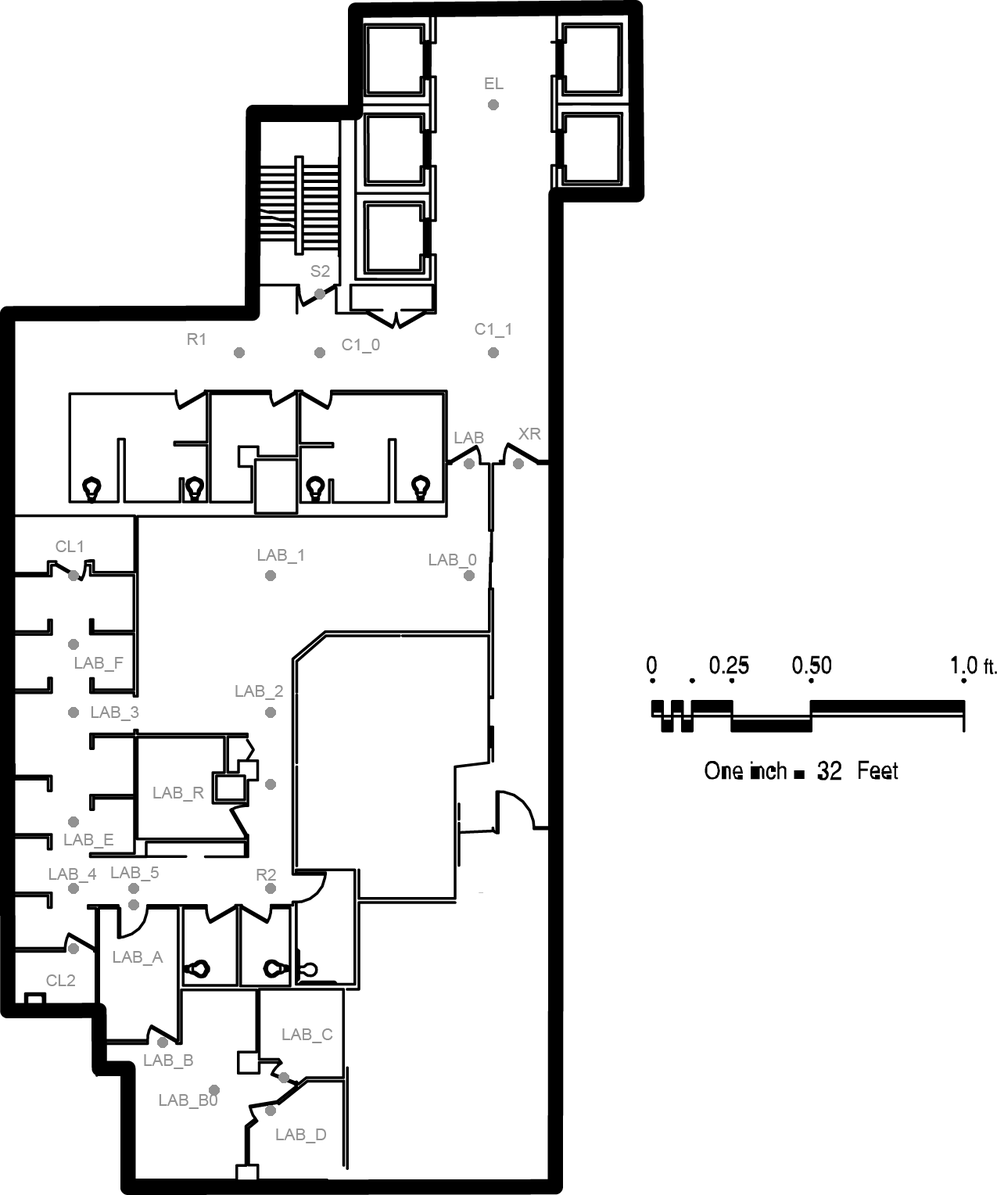
<style>
.page{position:relative;width:997px;height:1195px;background:#ffffff}
.page>*{position:absolute;margin:0}
.t1{font:16.3px "ArialMT";color:#929292;font-variant:small-caps}
</style>
<div class="page">
<p class="t1" style="left:485px;top:77px;width:19px;height:12px">EL</p>
<p class="t1" style="left:311px;top:265px;width:19px;height:12px">S2</p>
<p class="t1" style="left:475px;top:323px;width:36px;height:15px">C1_1</p>
<p class="t1" style="left:188px;top:333px;width:17px;height:12px">R1</p>
<p class="t1" style="left:342px;top:339px;width:38px;height:15px">C1_0</p>
<p class="t1" style="left:455px;top:432px;width:29px;height:12px">LAB</p>
<p class="t1" style="left:519px;top:428px;width:22px;height:12px">XR</p>
<p class="t1" style="left:56px;top:541px;width:27px;height:11px">CL1</p>
<p class="t1" style="left:257px;top:549px;width:47px;height:15px">LAB_1</p>
<p class="t1" style="left:429px;top:554px;width:48px;height:15px">LAB_0</p>
<p class="t1" style="left:74px;top:657px;width:50px;height:15px">LAB_F</p>
<p class="t1" style="left:235px;top:685px;width:48px;height:15px">LAB_2</p>
<p class="t1" style="left:91px;top:706px;width:48px;height:15px">LAB_3</p>
<p class="t1" style="left:153px;top:787px;width:51px;height:15px">LAB_R</p>
<p class="t1" style="left:64px;top:834px;width:49px;height:15px">LAB_E</p>
<p class="t1" style="left:49px;top:868px;width:48px;height:15px">LAB_4</p>
<p class="t1" style="left:111px;top:867px;width:48px;height:15px">LAB_5</p>
<p class="t1" style="left:257px;top:869px;width:19px;height:12px">R2</p>
<p class="t1" style="left:113px;top:951px;width:51px;height:15px">LAB_A</p>
<p class="t1" style="left:46px;top:975px;width:29px;height:12px">CL2</p>
<p class="t1" style="left:282px;top:1029px;width:51px;height:15px">LAB_C</p>
<p class="t1" style="left:144px;top:1055px;width:49px;height:14px">LAB_B</p>
<p class="t1" style="left:159px;top:1095px;width:58px;height:14px">LAB_B0</p>
<p class="t1" style="left:276px;top:1129px;width:51px;height:15px">LAB_D</p>
</div>
